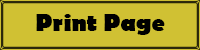
<style>
.page{position:relative;width:200px;height:50px;background:#d0c133}
.page>*{position:absolute;margin:0}
.t1{font:25px "BerlinSansFB-Bold";color:#000000}
</style>
<div class="page">
<p class="t1" style="left:36px;top:14px;width:129px;height:21px">Print Page</p>
</div>
